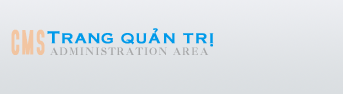
<style>
.page{position:relative;width:343px;height:94px}
.page>*{position:absolute;margin:0}
.t1{font:36.9px "AccidentalPresidency";letter-spacing:0.1em;color:#f2c5a1;font-weight:bold;scale:0.58 1}
.t2{font:16px "VNI-Copper";letter-spacing:0.05em;color:#009aea;font-weight:bold}
.t3{font:10px "NVTCasablancaNormal";letter-spacing:0.1em;color:#a7a8a9;scale:1.25 1}
</style>
<div class="page">
<p class="t1" style="left:11px;top:29px;width:34px;height:26px">CMS</p>
<p class="t2" style="left:47px;top:28px;width:167px;height:19px">Trang quaûn trò</p>
<p class="t3" style="left:50px;top:47px;width:159px;height:9px">ADMINISTRATION AREA</p>
</div>
